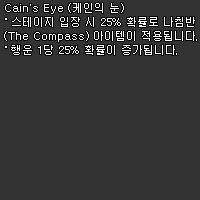
<style>
.page{position:relative;width:200px;height:200px;background:#333333}
.page>*{position:absolute;margin:0}
.t1{font:11px/14px "Dotum";color:#ffffff}
</style>
<div class="page">
<p class="t1" style="left:4px;top:3px;width:193px;height:52px">Cain's Eye (케인의 눈)<br>˚ 스테이지 입장 시 25% 확률로 나침반<br>(The Compass) 아이템이 적용됩니다.<br>˚ 행운 1당 25% 확률이 증가됩니다.</p>
</div>
